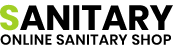
<style>
.page{position:relative;width:173px;height:50px;background:#ffffff}
.page>*{position:absolute;margin:0}
.t1{font:35px "Poppins-Bold";color:#000000;text-transform:uppercase}
.t2{font:35px "Poppins-Bold";color:#a1cf25;text-transform:uppercase}
.t3{font:14.5px "Poppins-SemiBold";letter-spacing:0.02em;color:#000000;text-transform:uppercase}
</style>
<div class="page">
<p class="t1" style="left:0px;top:4px;width:173px;height:27px"><span class="t2">S</span>anitary</p>
<p class="t3" style="left:0px;top:34px;width:171px;height:11px">Online Sanitary Shop</p>
</div>
